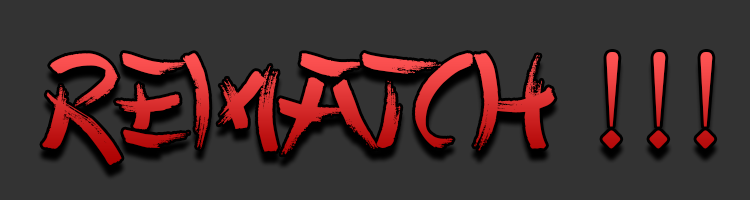
<style>
.page{position:relative;width:750px;height:200px;background:#333333}
.page>*{position:absolute;margin:0}
.t1{font:134.7px "ChineseTakeaway";scale:1.07 1}
</style>
<div class="page">
<p class="t1" style="left:42px;top:52px;width:673px;height:113px">Rematch !!!</p>
</div>
